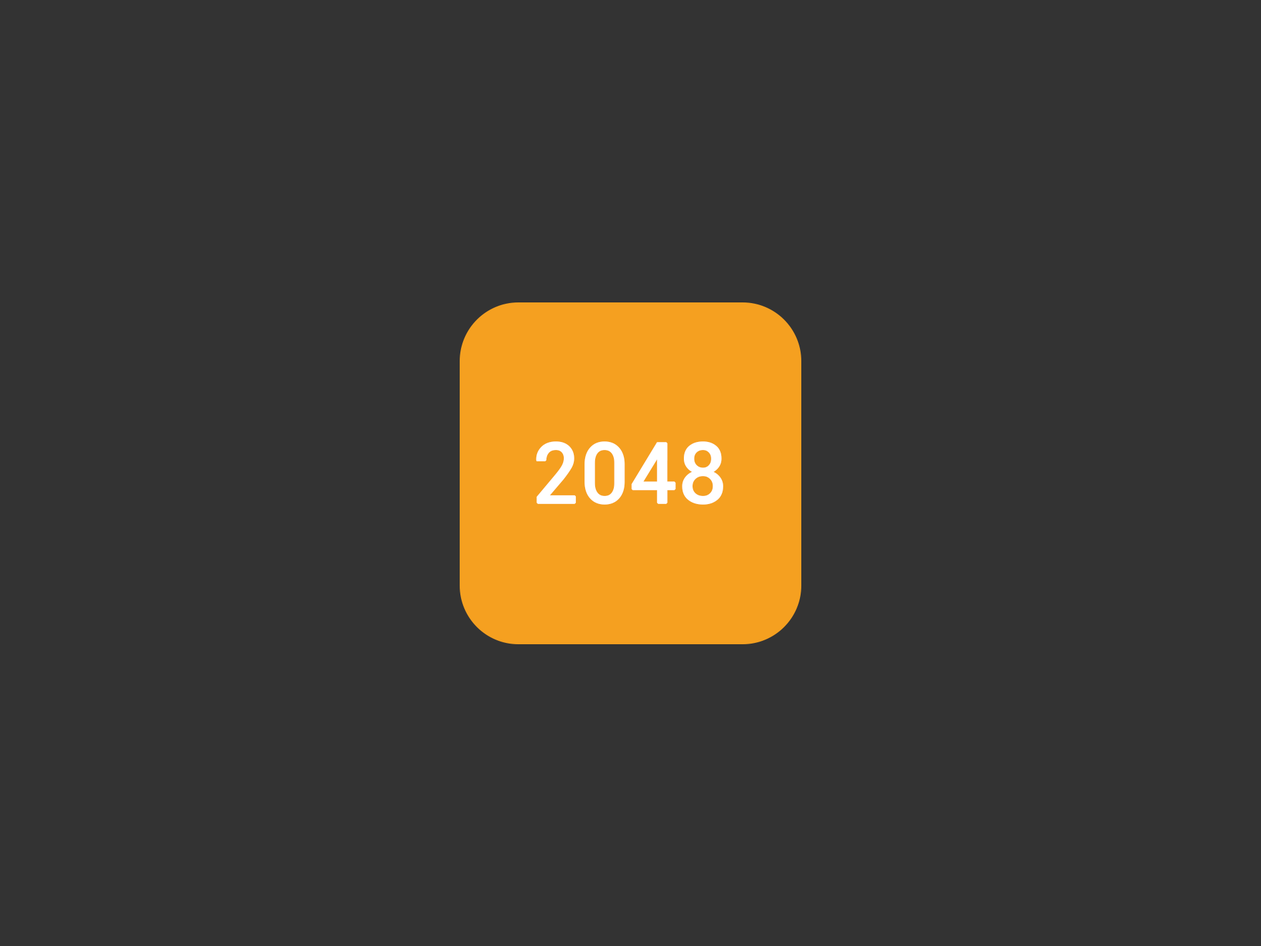
<style>
.page{position:relative;width:1261px;height:946px;background:#333333}
.page>*{position:absolute;margin:0}
.t1{font:83.4px "Roboto-Regular";color:#ffffff;font-weight:bold}
</style>
<div class="page">
<p class="t1" style="left:536px;top:441px;width:187px;height:63px">2048</p>
</div>
